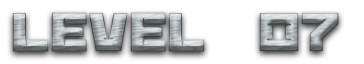
<style>
.page{position:relative;width:364px;height:64px;background:#ffffff}
.page>*{position:absolute;margin:0}
.t1{font:60px "BananaBrick"}
</style>
<div class="page">
<p class="t1" style="left:12px;top:12px;width:327px;height:40px">Level  07</p>
</div>
